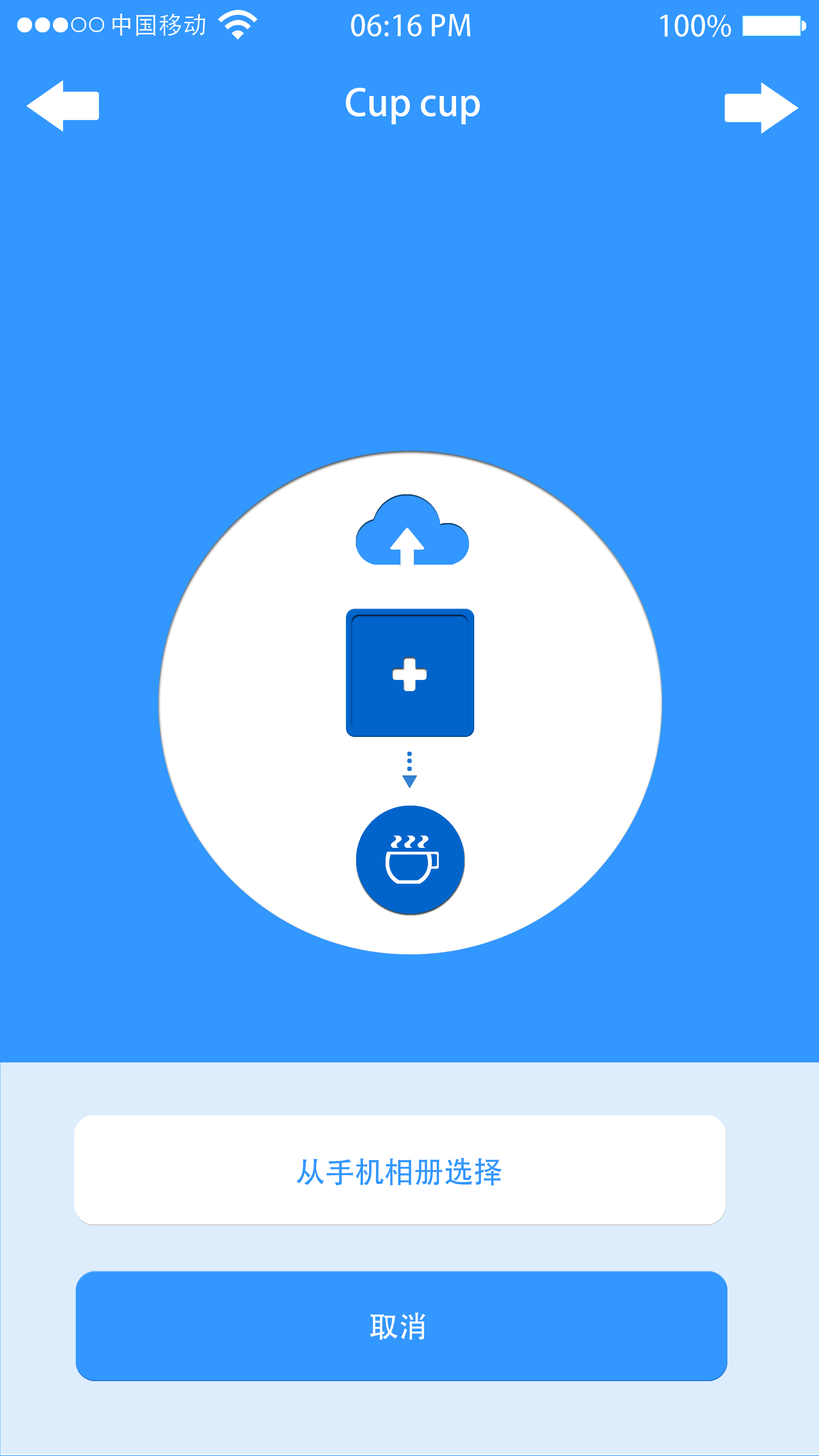
<style>
.page{position:relative;width:819px;height:1456px;background:#3297ff}
.page>*{position:absolute;margin:0}
.t1{font:36.7px "AdobeHeitiStd-Regular";color:#ffffff}
.t2{font:29.7px "AdobeHeitiStd-Regular";color:#3297ff}
.t3{font:29.7px "AdobeHeitiStd-Regular";color:#fefeff}
</style>
<div class="page">
<p class="t1" style="left:346px;top:87px;width:134px;height:37px">Cup cup</p>
<p class="t2" style="left:296px;top:1158px;width:206px;height:28px">从手机相册选择</p>
<p class="t3" style="left:370px;top:1313px;width:55px;height:27px">取消</p>
</div>
